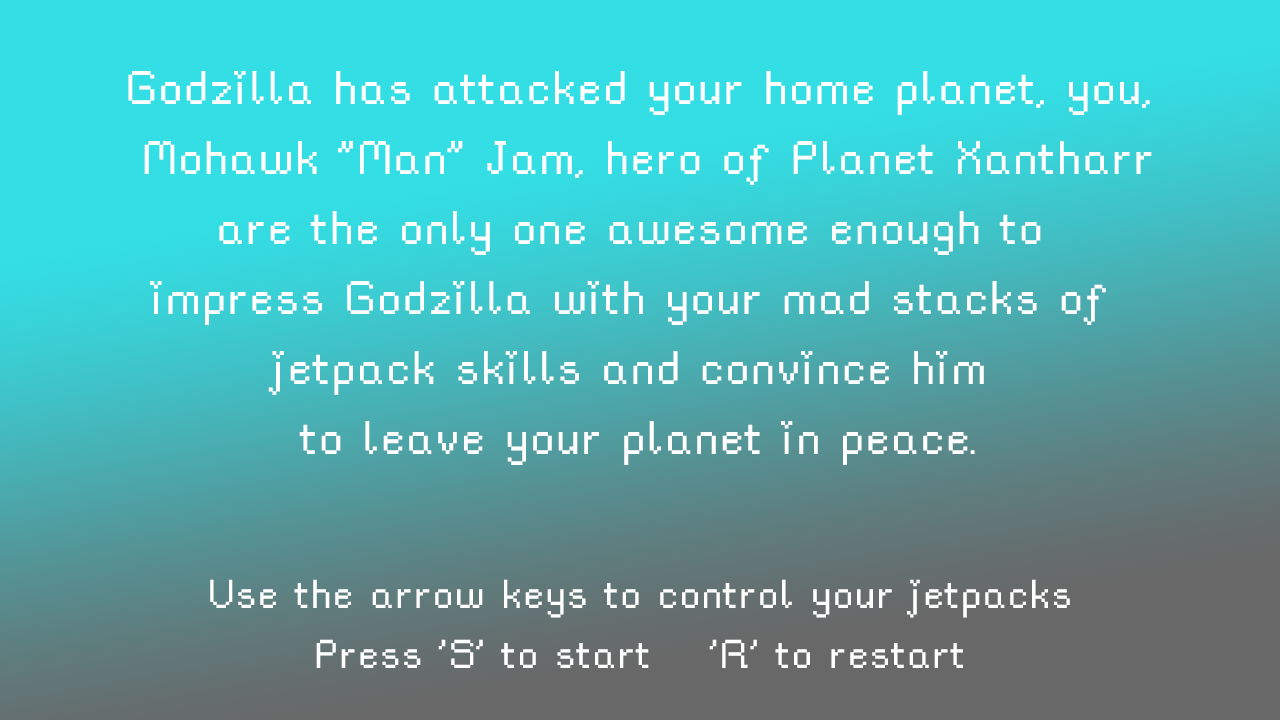
<style>
.page{position:relative;width:1280px;height:720px}
.page>*{position:absolute;margin:0}
.t1{font:58.3px "rainyhearts";color:#ffffff}
.t2{font:50px "rainyhearts";color:#ffffff}
</style>
<div class="page">
<p class="t1" style="left:128px;top:71px;width:1024px;height:394px;text-align:center">Godzilla has attacked your home planet, you,<br> Mohawk "Man" Jam, hero of Planet Xantharr<br>are the only one awesome enough to <br>impress Godzilla with your mad stacks of <br>jetpack skills and convince him <br>to leave your planet in peace.</p>
<p class="t2" style="left:210px;top:579px;width:860px;height:89px;text-align:center">Use the arrow keys to control your jetpacks<br>Press 'S' to start  'R' to restart</p>
</div>
